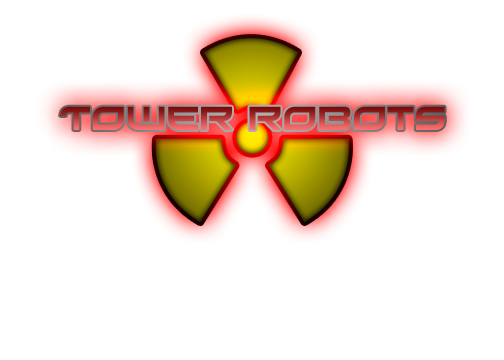
<style>
.page{position:relative;width:504px;height:360px;background:#ffffff}
.page>*{position:absolute;margin:0}
.t1{font:30px "Xirod-Regular"}
</style>
<div class="page">
<p class="t1" style="left:60px;top:106px;width:385px;height:24px">Tower Robots</p>
</div>
